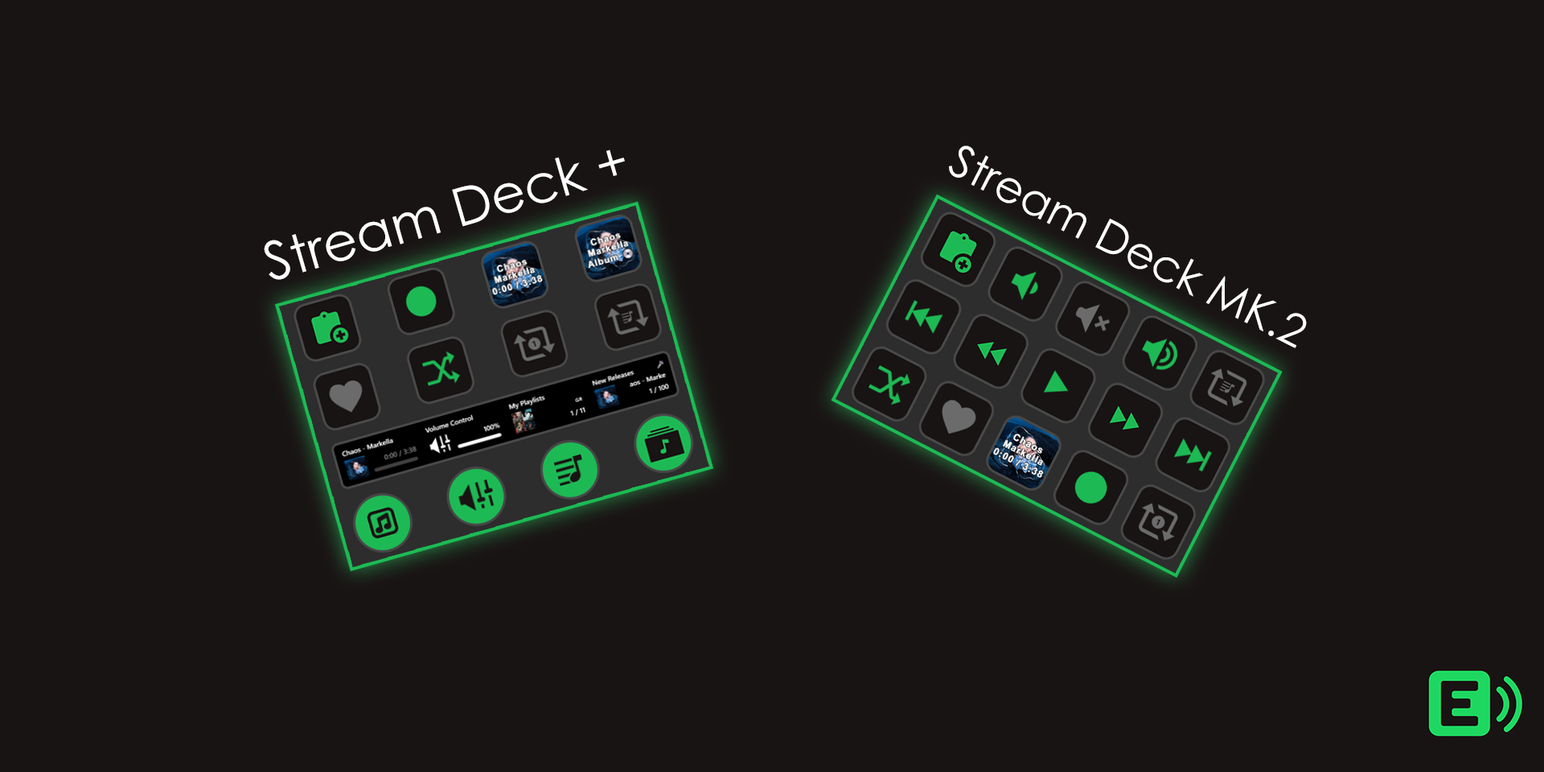
<style>
.page{position:relative;width:1544px;height:772px;background:#191414}
.page>*{position:absolute;margin:0}
.t1{font:53px "CenturyGothic";color:#ffffff}
.t2{font:44.5px "CenturyGothic";color:#ffffff}
</style>
<div class="page">
<p class="t1" style="left:264px;top:150px;width:361px;height:130px;rotate:-16deg">Stream Deck +</p>
<p class="t2" style="left:949px;top:146px;width:358px;height:202px;rotate:27deg">Stream Deck MK.2</p>
</div>
